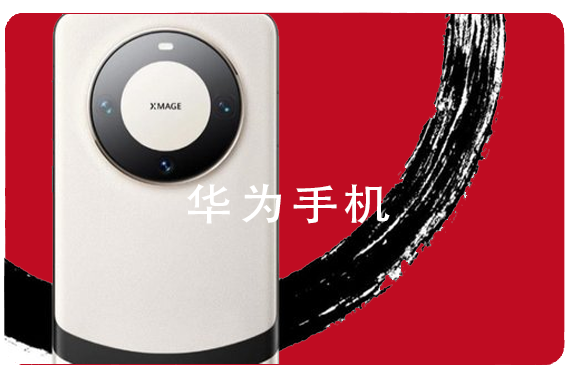
<style>
.page{position:relative;width:578px;height:379px;background:#bf0c22}
.page>*{position:absolute;margin:0}
.t1{font:43.2px "AdobeHeitiStd-Regular";letter-spacing:0.1em;color:#ffffff;text-transform:uppercase;scale:1.11 1}
</style>
<div class="page">
<p class="t1" style="left:187px;top:183px;width:203px;height:41px">华为手机</p>
</div>
